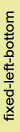
<style>
.page{position:relative;width:20px;height:132px;background:#ebeca1}
.page>*{position:absolute;margin:0}
.t1{font:14px "ArialMT";color:#000000;scale:1.1 1}
</style>
<div class="page">
<p class="t1" style="left:3px;top:11px;width:11px;height:110px;rotate:-90deg">fixed-left-bottom</p>
</div>
